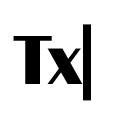
<style>
.page{position:relative;width:128px;height:128px;background:#ffffff}
.page>*{position:absolute;margin:0}
.t1{font:72px "BritannicBold";letter-spacing:-0.04em;color:#000000}
</style>
<div class="page">
<p class="t1" style="left:13px;top:36px;width:70px;height:48px">Tx</p>
</div>
